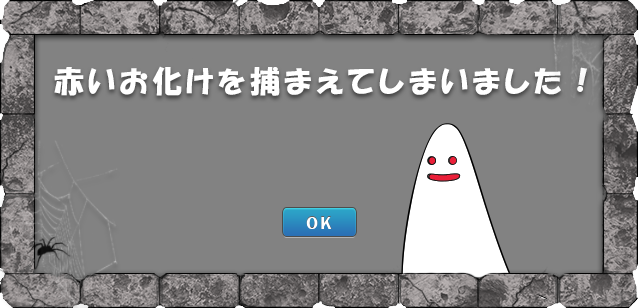
<style>
.page{position:relative;width:639px;height:308px;background:#828282}
.page>*{position:absolute;margin:0}
.t1{font:30px "HGPSoeiKakupoptai";letter-spacing:0.14em;color:#ffffff}
</style>
<div class="page">
<p class="t1" style="left:54px;top:66px;width:533px;height:30px">赤いお化けを捕まえてしまいました！</p>
</div>
